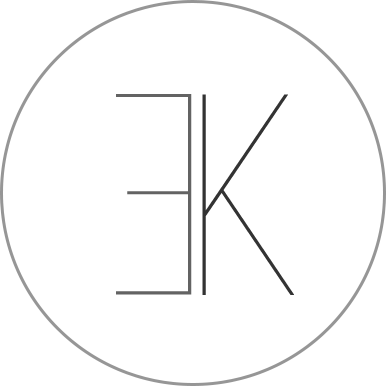
<style>
.page{position:relative;width:386px;height:386px;background:#ffffff}
.page>*{position:absolute;margin:0}
.t1{font:286px "BebasNeue-Thin";color:#636363}
.t2{font:286px "BebasNeue-Thin";color:#333333}
</style>
<div class="page">
<p class="t1" style="left:116px;top:94px;width:76px;height:201px;rotate:180deg">E</p>
<p class="t2" style="left:202px;top:94px;width:92px;height:201px">K</p>
</div>
